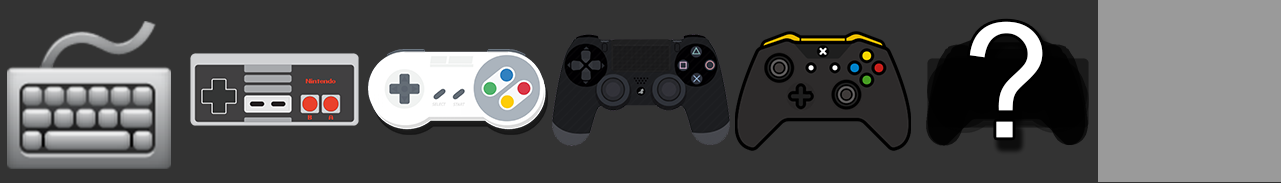
<style>
.page{position:relative;width:1281px;height:183px;background:#333333}
.page>*{position:absolute;margin:0}
.t1{font:156.8px "ArialMT";color:#ffffff;font-weight:bold}
</style>
<div class="page">
<p class="t1" style="left:969px;top:21px;width:74px;height:117px">?</p>
</div>
